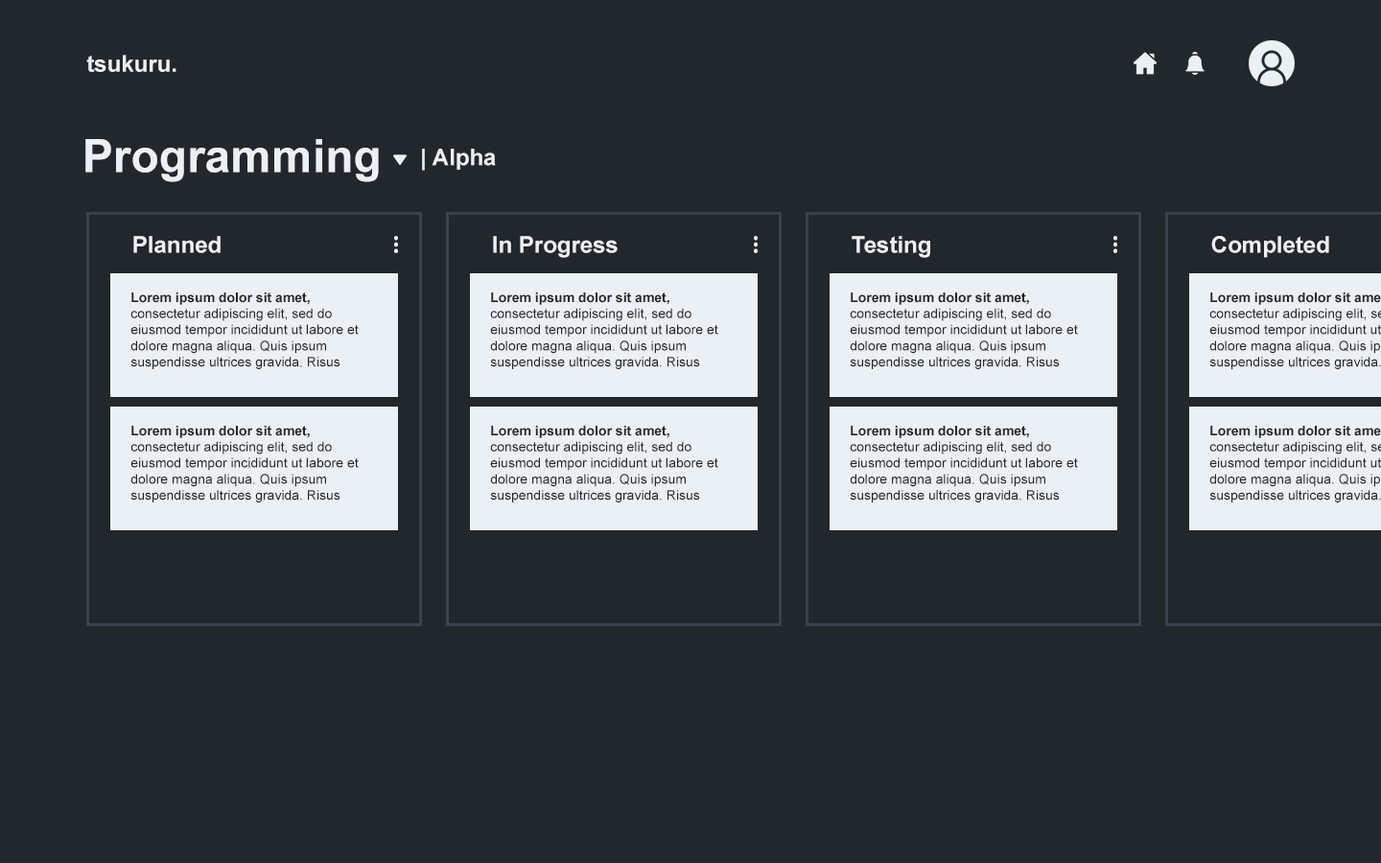
<style>
.page{position:relative;width:1381px;height:863px;background:#22272c}
.page>*{position:absolute;margin:0}
.t1{font:23px "Arial-BoldMT";color:#ebf0f4}
.t2{font:46px "Arial-BoldMT";color:#ebf0f4}
.t3{font:13.4px "ArialMT";color:#22272c}
.t4{font:13.4px "Arial-BoldMT";color:#22272c}
</style>
<div class="page">
<p class="t1" style="left:86px;top:55px;width:90px;height:17px">tsukuru.</p>
<p class="t2" style="left:85px;top:139px;width:294px;height:43px">Programming</p>
<p class="t1" style="left:422px;top:149px;width:74px;height:22px">| Alpha</p>
<p class="t1" style="left:133px;top:236px;width:88px;height:17px">Planned</p>
<p class="t1" style="left:493px;top:236px;width:125px;height:22px">In Progress</p>
<p class="t1" style="left:852px;top:236px;width:78px;height:22px">Testing</p>
<p class="t1" style="left:1211px;top:236px;width:118px;height:22px">Completed</p>
<p class="t3" style="left:130px;top:293px;width:229px;height:76px"><span class="t4">Lorem ipsum dolor sit amet, </span>consectetur adipiscing elit, sed do eiusmod tempor incididunt ut labore et dolore magna aliqua. Quis ipsum suspendisse ultrices gravida. Risus <span class="t4">commodo viverra maecenas accumsan lacus vel facilisis.</span></p>
<p class="t3" style="left:490px;top:293px;width:228px;height:76px"><span class="t4">Lorem ipsum dolor sit amet, </span>consectetur adipiscing elit, sed do eiusmod tempor incididunt ut labore et dolore magna aliqua. Quis ipsum suspendisse ultrices gravida. Risus <span class="t4">commodo viverra maecenas accumsan lacus vel facilisis.</span></p>
<p class="t3" style="left:850px;top:293px;width:228px;height:76px"><span class="t4">Lorem ipsum dolor sit amet, </span>consectetur adipiscing elit, sed do eiusmod tempor incididunt ut labore et dolore magna aliqua. Quis ipsum suspendisse ultrices gravida. Risus <span class="t4">commodo viverra maecenas accumsan lacus vel facilisis.</span></p>
<p class="t3" style="left:130px;top:426px;width:229px;height:77px"><span class="t4">Lorem ipsum dolor sit amet, </span>consectetur adipiscing elit, sed do eiusmod tempor incididunt ut labore et dolore magna aliqua. Quis ipsum suspendisse ultrices gravida. Risus <span class="t4">commodo viverra maecenas accumsan lacus vel facilisis.</span></p>
<p class="t3" style="left:490px;top:426px;width:228px;height:77px"><span class="t4">Lorem ipsum dolor sit amet, </span>consectetur adipiscing elit, sed do eiusmod tempor incididunt ut labore et dolore magna aliqua. Quis ipsum suspendisse ultrices gravida. Risus <span class="t4">commodo viverra maecenas accumsan lacus vel facilisis.</span></p>
<p class="t3" style="left:850px;top:426px;width:228px;height:77px"><span class="t4">Lorem ipsum dolor sit amet, </span>consectetur adipiscing elit, sed do eiusmod tempor incididunt ut labore et dolore magna aliqua. Quis ipsum suspendisse ultrices gravida. Risus <span class="t4">commodo viverra maecenas accumsan lacus vel facilisis.</span></p>
</div>
